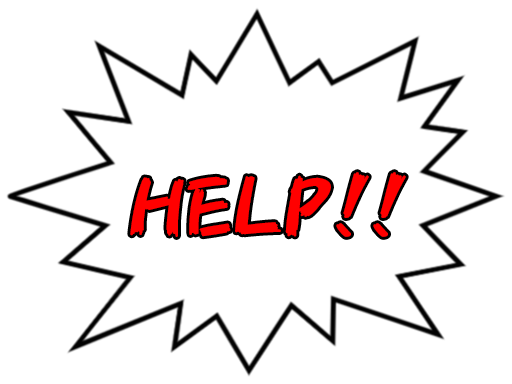
<style>
.page{position:relative;width:512px;height:384px;background:#ffffff}
.page>*{position:absolute;margin:0}
.t1{font:76px "851CHIKARA-DZUYOKU-KANA-B";color:#ff0000}
</style>
<div class="page">
<p class="t1" style="left:130px;top:172px;width:276px;height:65px">HELP!!</p>
</div>
